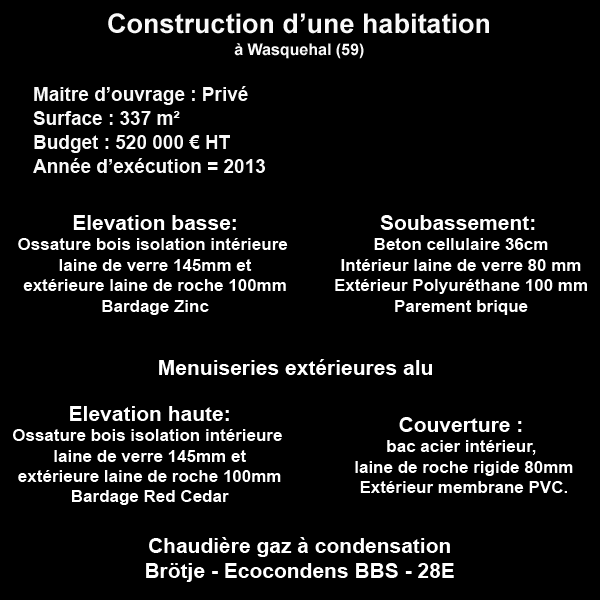
<style>
.page{position:relative;width:600px;height:600px;background:#000000}
.page>*{position:absolute;margin:0}
.t1{font:27px/22.7px "Arial-BoldMT";color:#f9f9f9}
.t2{font:16px/22.7px "Arial-BoldMT";color:#f9f9f9}
.t3{font:19px/24px "Arial-BoldMT";color:#f9f9f9}
.t4{font:17px "Arial-BoldMT";color:#ffffff}
.t5{font:21px "Arial-BoldMT";color:#ffffff}
</style>
<div class="page">
<p class="t1" style="left:108px;top:13px;width:381px;height:46px;text-align:center">Construction d’une habitation<br><span class="t2">à Wasquehal (59)</span></p>
<p class="t3" style="left:33px;top:86px;width:232px;height:87px">Maitre d’ouvrage : Privé<br>Surface : 337 m²<br>Budget : 520 000 € HT<br>Année d’exécution = 2013</p>
<p class="t4" style="left:18px;top:215px;width:270px;height:100px;text-align:center"><span class="t5">Elevation basse:<br></span>Ossature bois isolation intérieure <br>laine de verre 145mm et<br>extérieure laine de roche 100mm<br>Bardage Zinc</p>
<p class="t4" style="left:335px;top:215px;width:252px;height:100px;text-align:center"><span class="t5">Soubassement: <br></span>Beton cellulaire 36cm<br>Intérieur laine de verre 80 mm<br>Extérieur Polyuréthane 100 mm<br>Parement brique</p>
<p class="t5" style="left:159px;top:359px;width:273px;height:16px">Menuiseries extérieures alu</p>
<p class="t4" style="left:13px;top:406px;width:269px;height:99px;text-align:center"><span class="t5">Elevation haute:<br></span>Ossature bois isolation intérieure <br>laine de verre 145mm et<br>extérieure laine de roche 100mm<br>Bardage Red Cedar</p>
<p class="t4" style="left:355px;top:417px;width:218px;height:76px;text-align:center"><span class="t5">Couverture : <br></span>bac acier intérieur, <br>laine de roche rigide 80mm<br>Extérieur membrane PVC.</p>
<p class="t5" style="left:146px;top:537px;width:308px;height:45px;text-align:center">Chaudière gaz à condensation<br>Brötje - Ecocondens BBS - 28E</p>
</div>
